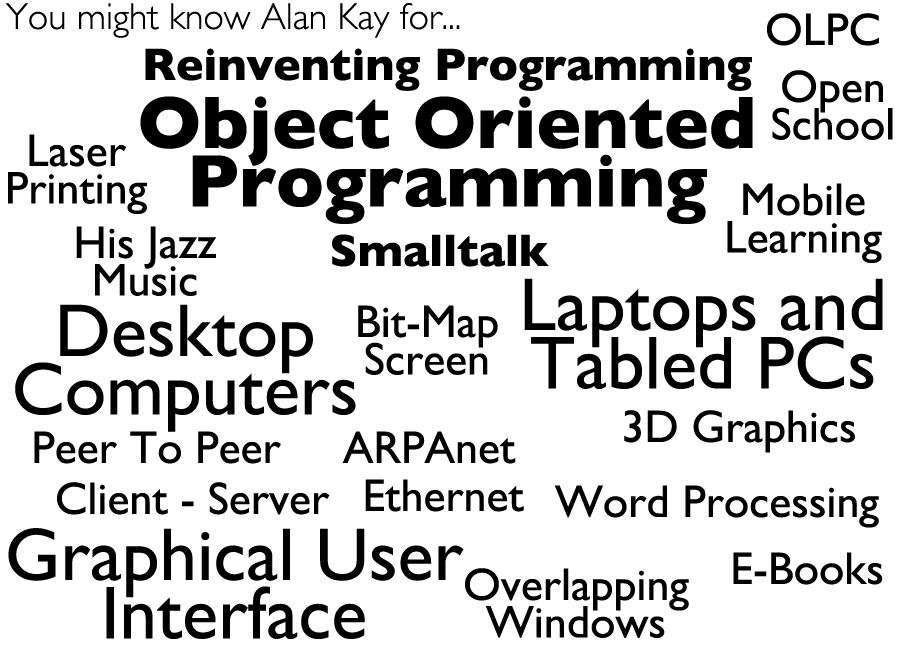
<style>
.page{position:relative;width:900px;height:660px;background:#ffffff}
.page>*{position:absolute;margin:0}
.t1{font:37.5px "GillSans-Light";color:#000000}
.t2{font:45.8px "GillSans";color:#000000}
.t3{font:45.8px "GillSans-Bold";color:#000000}
.t4{font:45.8px/37.5px "GillSans";color:#000000}
.t5{font:75px/58.3px "GillSans-Bold";color:#000000}
.t6{font:75px/58.3px "GillSans";color:#000000}
</style>
<div class="page">
<p class="t1" style="left:6px;top:3px;width:454px;height:35px">You might know Alan Kay for...</p>
<p class="t2" style="left:767px;top:13px;width:112px;height:33px">OLPC</p>
<p class="t3" style="left:145px;top:48px;width:607px;height:43px">Reinventing Programming</p>
<p class="t4" style="left:772px;top:70px;width:121px;height:70px;text-align:center">Open<br>School</p>
<p class="t5" style="left:140px;top:96px;width:613px;height:128px;text-align:center">Object Oriented<br>Programming</p>
<p class="t4" style="left:8px;top:134px;width:139px;height:80px;text-align:center">Laser<br>Printing</p>
<p class="t4" style="left:727px;top:183px;width:155px;height:80px;text-align:center">Mobile<br>Learning</p>
<p class="t4" style="left:76px;top:226px;width:140px;height:70px;text-align:center">His Jazz<br>Music</p>
<p class="t3" style="left:332px;top:234px;width:217px;height:33px">Smalltalk</p>
<p class="t6" style="left:524px;top:278px;width:359px;height:111px;text-align:center">Laptops and<br>Tabled PCs</p>
<p class="t6" style="left:15px;top:304px;width:341px;height:128px;text-align:center">Desktop<br>Computers</p>
<p class="t4" style="left:358px;top:305px;width:140px;height:70px;text-align:center">Bit-Map<br>Screen</p>
<p class="t2" style="left:624px;top:410px;width:231px;height:43px">3D Graphics</p>
<p class="t2" style="left:34px;top:431px;width:247px;height:33px">Peer To Peer</p>
<p class="t2" style="left:342px;top:431px;width:174px;height:33px">ARPAnet</p>
<p class="t2" style="left:57px;top:482px;width:273px;height:33px">Client - Server</p>
<p class="t2" style="left:365px;top:479px;width:159px;height:33px">Ethernet</p>
<p class="t2" style="left:555px;top:485px;width:324px;height:43px">Word Processing</p>
<p class="t6" style="left:8px;top:528px;width:456px;height:111px;text-align:center">Graphical User<br>Interface</p>
<p class="t2" style="left:733px;top:552px;width:150px;height:33px">E-Books</p>
<p class="t4" style="left:465px;top:568px;width:224px;height:70px;text-align:center">Overlapping<br>Windows</p>
</div>
